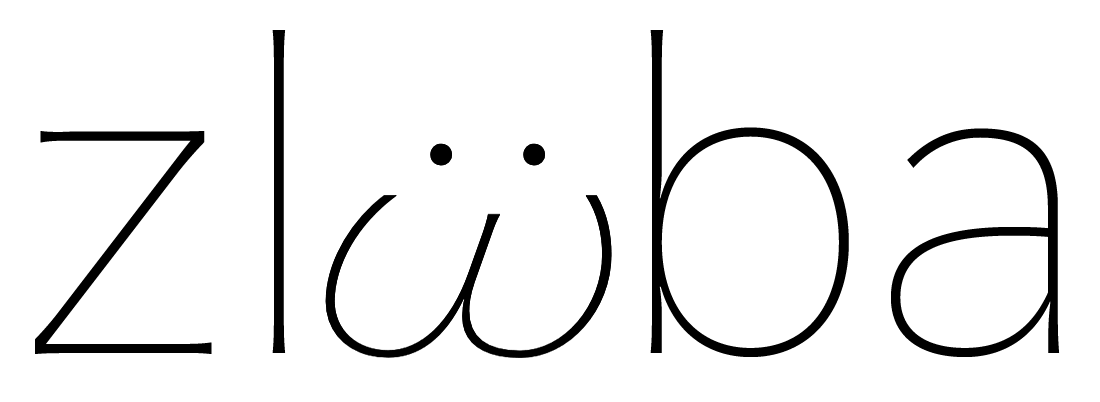
<style>
.page{position:relative;width:1100px;height:402px;background:#ffffff}
.page>*{position:absolute;margin:0}
.t1{font:425px "HiraginoSans-W0";color:#000000}
.t2{font:333.3px "HiraginoSans-W0";color:#000000}
</style>
<div class="page">
<p class="t1" style="left:35px;top:30px;width:1025px;height:327px">zl   ba</p>
<p class="t2" style="left:430px;top:143px;width:22px;height:23px">.</p>
<p class="t2" style="left:523px;top:143px;width:22px;height:23px">.</p>
</div>
